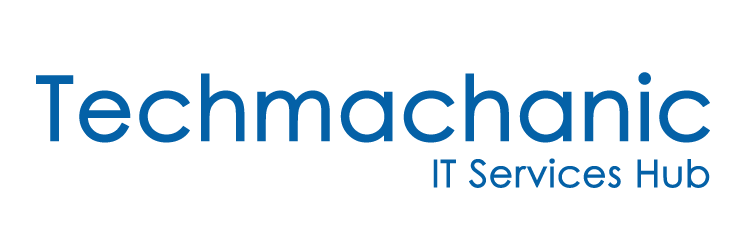
<style>
.page{position:relative;width:750px;height:225px;background:#ffffff}
.page>*{position:absolute;margin:0}
.t1{font:88.5px "CenturyGothic";color:#0461a7;font-weight:bold}
.t2{font:37.5px "CenturyGothic";color:#0461a7;font-weight:bold}
</style>
<div class="page">
<p class="t1" style="left:36px;top:72px;width:674px;height:71px">Techmachanic</p>
<p class="t2" style="left:433px;top:158px;width:277px;height:30px">IT Services Hub</p>
</div>
